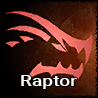
<style>
.page{position:relative;width:98px;height:98px}
.page>*{position:absolute;margin:0}
.t1{font:16px "Roboto-Medium";color:#ffffff;scale:1.2 1}
</style>
<div class="page">
<p class="t1" style="left:21px;top:75px;width:56px;height:14px">Raptor</p>
</div>
